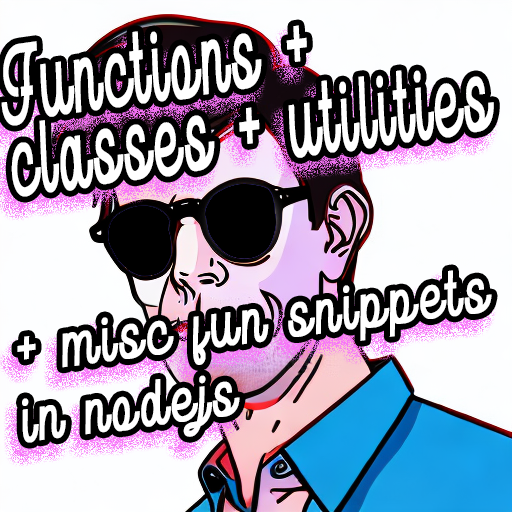
<style>
.page{position:relative;width:512px;height:512px;background:#fdfeff}
.page>*{position:absolute;margin:0}
.t1{font:51.7px/75px "Marylane";letter-spacing:0.2em;color:#ffffff;font-weight:bold;font-style:italic;scale:0.55 1}
.t2{font:32.4px/70px "Marylane";letter-spacing:0.2em;color:#ffffff;font-weight:bold;font-style:italic;scale:0.8 1}
.t3{font:32.4px/70px "SFUIDisplay-Bold";letter-spacing:0.2em;color:#ffffff;font-weight:bold;font-style:italic;scale:0.8 1}
</style>
<div class="page">
<p class="t1" style="left:1px;top:25px;width:493px;height:172px;rotate:-8deg">Functions + <br>classes + utilities</p>
<p class="t2" style="left:17px;top:270px;width:475px;height:173px;rotate:-7deg"><span class="t3"><br></span>+ misc fun snippets<br>in nodejs</p>
</div>
